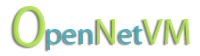
<style>
.page{position:relative;width:200px;height:56px;background:#ffffff}
.page>*{position:absolute;margin:0}
.t1{font:46.3px "Noteworthy-Bold";color:#b5e655}
.t2{font:30.2px "MyriadPro-Regular";color:#4bb5c1}
.t3{font:36.2px "MyriadPro-Regular";color:#b5e655}
</style>
<div class="page">
<p class="t1" style="left:13px;top:6px;width:33px;height:41px">O</p>
<p class="t2" style="left:47px;top:19px;width:143px;height:31px">pen<span class="t3">N</span>et<span class="t3">VM</span></p>
</div>
